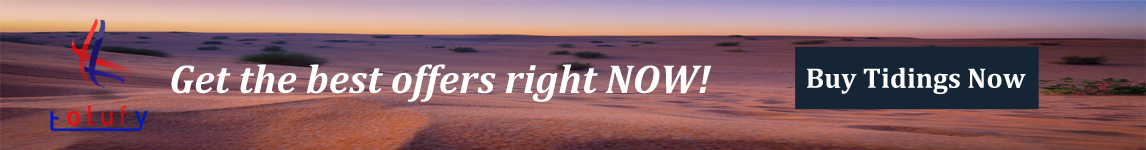
<style>
.page{position:relative;width:1146px;height:150px}
.page>*{position:absolute;margin:0}
.t1{font:40.6px "Cambria-BoldItalic";color:#ffffff}
.t2{font:28.5px "Cambria-Bold";color:#ffffff}
</style>
<div class="page">
<p class="t1" style="left:171px;top:64px;width:541px;height:38px">Get the best offers right NOW!</p>
<p class="t2" style="left:807px;top:67px;width:219px;height:27px">Buy Tidings Now</p>
</div>
